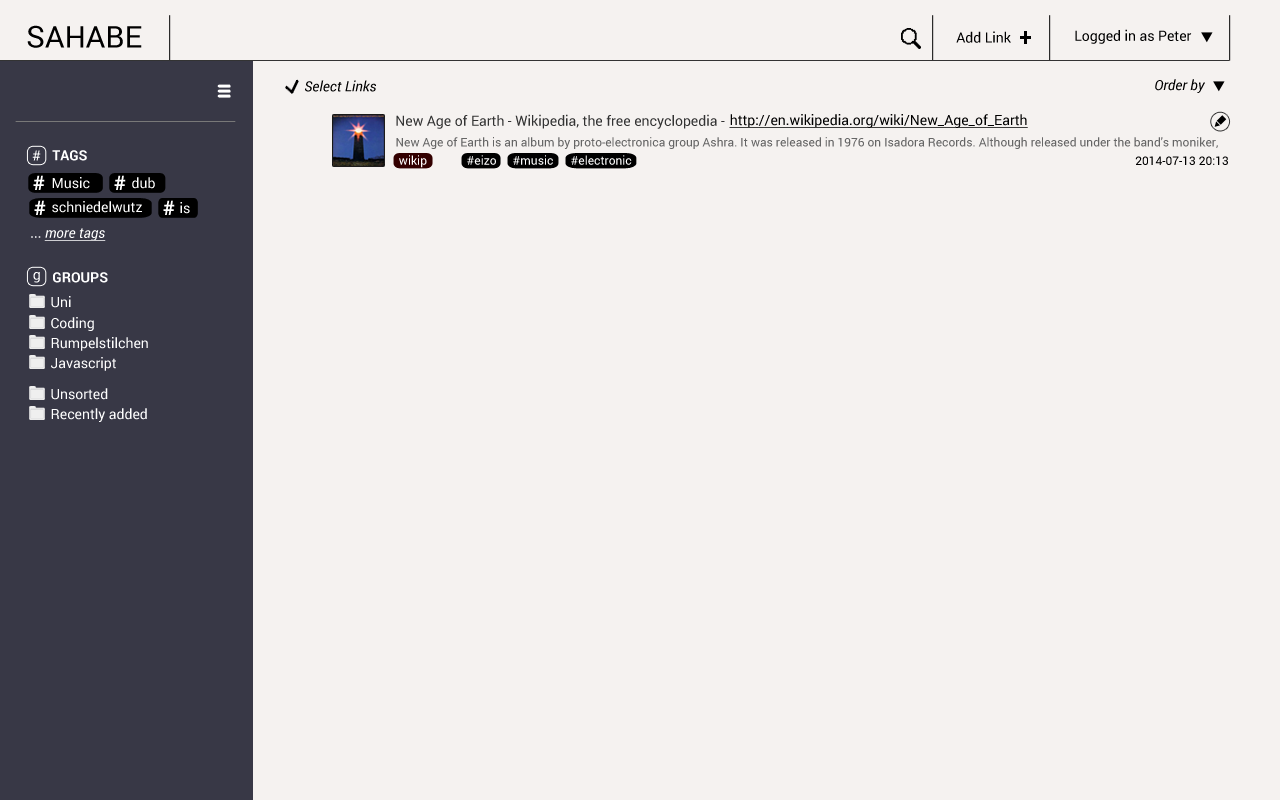
<style>
.page{position:relative;width:1280px;height:800px;background:#f5f2f0}
.page>*{position:absolute;margin:0}
.t1{font:30px "Roboto-Regular";color:#000000}
.t2{font:14px "Roboto-Regular";color:#000000}
.t3{font:24px "Roboto-Bold";color:#000000}
.t4{font:14px "Roboto-Italic";color:#000000}
.t5{font:14px "Roboto-Regular";color:#333333}
.t6{font:14px "Roboto-Regular";color:#000000;text-decoration:underline}
.t7{font:12px "Roboto-Regular";color:#666666}
.t8{font:14px "Roboto-Regular";color:#ffffff}
.t9{font:14px "Roboto-Bold";color:#ffffff}
.t10{font:12px "Roboto-Regular";color:#ffffff}
.t11{font:12px "Roboto-Regular";color:#000000}
.t12{font:20px "Roboto-Bold";color:#ffffff}
.t13{font:14px "Roboto-Italic";color:#ffffff;text-decoration:underline}
.t14{font:14px "Roboto-Regular";color:#fffefe}
</style>
<div class="page">
<p class="t1" style="left:27px;top:25px;width:115px;height:23px">SAHABE</p>
<p class="t2" style="left:1075px;top:29px;width:117px;height:15px">Logged in as Peter</p>
<p class="t2" style="left:956px;top:31px;width:55px;height:12px">Add Link</p>
<p class="t3" style="left:1020px;top:31px;width:11px;height:13px">+</p>
<p class="t4" style="left:305px;top:80px;width:71px;height:12px">Select Links</p>
<p class="t4" style="left:1155px;top:79px;width:50px;height:14px">Order by</p>
<p class="t5" style="left:396px;top:114px;width:329px;height:15px">New Age of Earth - Wikipedia, the free encyclopedia -</p>
<p class="t6" style="left:729px;top:114px;width:299px;height:14px">http://en.wikipedia.org/wiki/New_Age_of_Earth</p>
<p class="t7" style="left:396px;top:137px;width:822px;height:12px">New Age of Earth is an album by proto-electronica group Ashra. It was released in 1976 on Isadora Records. Although released under the band's moniker, it is a solo album by Ashra member Manuel Göttsching.</p>
<p class="t8" style="left:32px;top:150px;width:9px;height:11px">#</p>
<p class="t9" style="left:52px;top:150px;width:35px;height:11px">TAGS</p>
<p class="t10" style="left:399px;top:155px;width:28px;height:13px">wikip</p>
<p class="t10" style="left:467px;top:155px;width:29px;height:10px">#eizo</p>
<p class="t10" style="left:513px;top:155px;width:40px;height:10px">#music</p>
<p class="t10" style="left:571px;top:155px;width:61px;height:10px">#electronic</p>
<p class="t11" style="left:1135px;top:156px;width:93px;height:9px">2014-07-13 20:13</p>
<p class="t12" style="left:33px;top:175px;width:12px;height:15px">#</p>
<p class="t8" style="left:52px;top:177px;width:38px;height:12px">Music</p>
<p class="t12" style="left:114px;top:175px;width:12px;height:15px">#</p>
<p class="t8" style="left:132px;top:177px;width:23px;height:12px">dub</p>
<p class="t12" style="left:34px;top:200px;width:12px;height:15px">#</p>
<p class="t8" style="left:52px;top:201px;width:90px;height:12px">schniedelwutz</p>
<p class="t12" style="left:163px;top:200px;width:12px;height:15px">#</p>
<p class="t8" style="left:180px;top:202px;width:10px;height:12px">is</p>
<p class="t13" style="left:31px;top:228px;width:75px;height:13px"><span class="t8">... </span>more tags</p>
<p class="t8" style="left:33px;top:272px;width:7px;height:11px">g</p>
<p class="t9" style="left:53px;top:272px;width:55px;height:11px">GROUPS</p>
<p class="t8" style="left:51px;top:296px;width:20px;height:12px">Uni</p>
<p class="t8" style="left:51px;top:317px;width:43px;height:14px">Coding</p>
<p class="t8" style="left:51px;top:337px;width:97px;height:14px">Rumpelstilchen</p>
<p class="t14" style="left:51px;top:357px;width:65px;height:14px">Javascript</p>
<p class="t8" style="left:51px;top:388px;width:57px;height:12px">Unsorted</p>
<p class="t8" style="left:51px;top:408px;width:96px;height:14px">Recently added</p>
</div>
